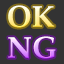
<style>
.page{position:relative;width:64px;height:64px;background:#333333}
.page>*{position:absolute;margin:0}
.t1{font:30px "PalatinoLinotype-Bold"}
</style>
<div class="page">
<p class="t1" style="left:8px;top:5px;width:47px;height:23px">OK</p>
<p class="t1" style="left:8px;top:36px;width:48px;height:23px">NG</p>
</div>
